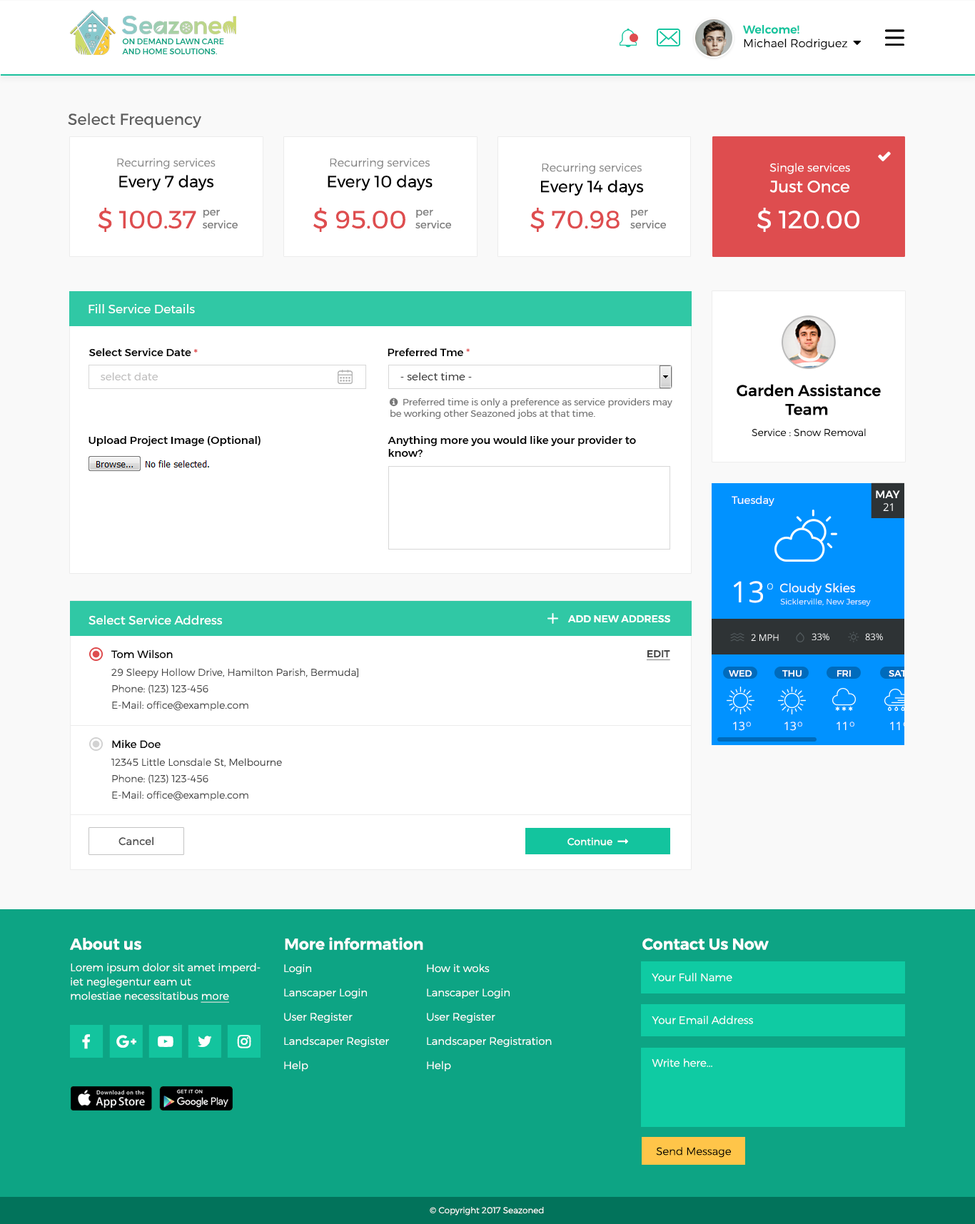
<style>
.page{position:relative;width:975px;height:1224px;background:#ffffff}
.page>*{position:absolute;margin:0}
.t1{font:11.4px "Montserrat-Light";color:#000000}
.t2{font:11.4px "Montserrat-Medium";color:#13c49e}
.t3{font:7.8px "Montserrat-Medium";color:#0da484;text-transform:uppercase}
.t4{font:15.7px "Montserrat-Regular";color:#5e5e5e}
.t5{font:11.4px/20.7px "Montserrat-Light";color:#858585}
.t6{font:16.4px/20.7px "Montserrat-Regular";color:#000000}
.t7{font:11.4px/20.7px "Montserrat-Light";color:#ffffff}
.t8{font:16.4px/20.7px "Montserrat-Regular";color:#ffffff}
.t9{font:25px "Montserrat-Regular";color:#de4d4f}
.t10{font:10.7px "Montserrat-Regular";color:#7f7f7f}
.t11{font:25px "Montserrat-Regular";color:#ffffff}
.t12{font:12.1px "Montserrat-Regular";color:#ffffff}
.t13{font:10.7px "Montserrat-Medium";color:#000000}
.t14{font:10.7px "Montserrat-Medium";color:#de4d4f}
.t15{font:4.1px "Montserrat-Light";color:#ffffff}
.t16{font:10.7px "Montserrat-Regular";color:#c0bfbf}
.t17{font:10.7px "Montserrat-Regular";color:#3d3d3d}
.t18{font:15.7px "Montserrat-Medium";color:#000000}
.t19{font:10px "Montserrat-Light";color:#000000}
.t20{font:10px "Montserrat-Medium";color:#ffffff;text-transform:uppercase}
.t21{font:10.7px "Montserrat-Regular";color:#000000}
.t22{font:10px "Montserrat-Medium";color:#474747;text-decoration:underline}
.t23{font:10px/16.4px "Montserrat-Light";color:#474747}
.t24{font:10.7px "Montserrat-Regular";color:#505050}
.t25{font:15.7px "Montserrat-SemiBold";color:#ffffff}
.t26{font:10.7px/14.3px "Montserrat-Light";color:#ffffff}
.t27{font:10.7px/14.3px "Montserrat-Light";color:#ffffff;text-decoration:underline}
.t28{font:10.7px/24.3px "Montserrat-Light";color:#ffffff}
.t29{font:10.7px "Montserrat-Light";color:#ffffff}
.t30{font:10.7px "Montserrat-Light";color:#000000}
.t31{font:8.6px "Montserrat-Light";color:#ffffff}
</style>
<div class="page">
<p class="t1" style="left:743px;top:25px;width:104px;height:25px"><span class="t2">Welcome! <br></span>Michael Rodriguez</p>
<p class="t3" style="left:122px;top:39px;width:102px;height:15px">on demand lawn care <br>and home solutions.</p>
<p class="t4" style="left:68px;top:113px;width:133px;height:15px">Select Frequency</p>
<p class="t5" style="left:117px;top:158px;width:98px;height:32px;text-align:center">Recurring services<br><span class="t6">Every 7 days</span></p>
<p class="t5" style="left:327px;top:158px;width:105px;height:32px;text-align:center">Recurring services<br><span class="t6">Every 10 days</span></p>
<p class="t5" style="left:541px;top:163px;width:103px;height:32px;text-align:center">Recurring services<br><span class="t6">Every 14 days</span></p>
<p class="t7" style="left:769px;top:163px;width:81px;height:30px;text-align:center">Single services<br><span class="t8">Just Once</span></p>
<p class="t9" style="left:98px;top:208px;width:98px;height:24px">$ 100.37</p>
<p class="t10" style="left:203px;top:210px;width:35px;height:19px">per<br>service</p>
<p class="t9" style="left:313px;top:208px;width:92px;height:24px">$ 95.00</p>
<p class="t10" style="left:415px;top:210px;width:36px;height:19px">per<br>service</p>
<p class="t9" style="left:530px;top:208px;width:89px;height:24px">$ 70.98</p>
<p class="t10" style="left:630px;top:210px;width:36px;height:19px">per<br>service</p>
<p class="t11" style="left:757px;top:208px;width:102px;height:24px">$ 120.00</p>
<p class="t12" style="left:88px;top:304px;width:107px;height:9px">Fill Service Details</p>
<p class="t13" style="left:88px;top:348px;width:110px;height:8px">Select Service Date <span class="t14">*</span></p>
<p class="t13" style="left:387px;top:347px;width:82px;height:9px">Preferred Tme <span class="t14">*</span></p>
<p class="t15" style="left:800px;top:362px;width:16px;height:5px">Change</p>
<p class="t16" style="left:101px;top:372px;width:57px;height:8px">select date</p>
<p class="t17" style="left:400px;top:372px;width:72px;height:8px">- select time -</p>
<p class="t18" style="left:736px;top:384px;width:144px;height:31px;text-align:center">Garden Assistance<br>Team</p>
<p class="t13" style="left:88px;top:436px;width:172px;height:10px">Upload Project Image (Optional)</p>
<p class="t13" style="left:387px;top:436px;width:249px;height:21px">Anything more you would like your provider to<br>know?</p>
<p class="t19" style="left:751px;top:428px;width:114px;height:9px">Service : Snow Removal</p>
<p class="t12" style="left:88px;top:615px;width:135px;height:10px">Select Service Address</p>
<p class="t20" style="left:567px;top:615px;width:103px;height:8px">Add new address</p>
<p class="t21" style="left:111px;top:649px;width:62px;height:10px">Tom Wilson</p>
<p class="t22" style="left:646px;top:650px;width:24px;height:10px">EDIT</p>
<p class="t23" style="left:111px;top:668px;width:247px;height:43px">29 Sleepy Hollow Drive, Hamilton Parish, Bermuda]<br>Phone: (123) 123-456<br>E-Mail: office@example.com</p>
<p class="t21" style="left:112px;top:739px;width:49px;height:9px">Mike Doe</p>
<p class="t23" style="left:111px;top:758px;width:171px;height:42px">12345 Little Lonsdale St, Melbourne<br>Phone: (123) 123-456<br>E-Mail: office@example.com</p>
<p class="t24" style="left:118px;top:836px;width:35px;height:9px">Cancel</p>
<p class="t25" style="left:70px;top:937px;width:71px;height:13px">About us</p>
<p class="t25" style="left:285px;top:937px;width:138px;height:13px">More information</p>
<p class="t25" style="left:642px;top:937px;width:126px;height:13px">Contact Us Now</p>
<p class="t26" style="left:71px;top:962px;width:189px;height:40px">Lorem ipsum dolor sit amet imperdiet neglegentur eam ut<br>molestiae necessitatibus <span class="t27">more</span></p>
<p class="t28" style="left:284px;top:964px;width:105px;height:107px">Login<br>Lanscaper Login<br>User Register<br>Landscaper Register<br>Help</p>
<p class="t28" style="left:427px;top:963px;width:124px;height:108px">How it woks<br>Lanscaper Login<br>User Register<br>Landscaper Registration<br>Help</p>
<p class="t29" style="left:651px;top:972px;width:81px;height:9px">Your Full Name</p>
<p class="t29" style="left:651px;top:1015px;width:102px;height:9px">Your Email Address</p>
<p class="t29" style="left:651px;top:1058px;width:61px;height:9px">Write here...</p>
<p class="t30" style="left:656px;top:1147px;width:75px;height:10px">Send Message</p>
<p class="t31" style="left:429px;top:1206px;width:115px;height:9px">© Copyright 2017 Seazoned</p>
</div>
